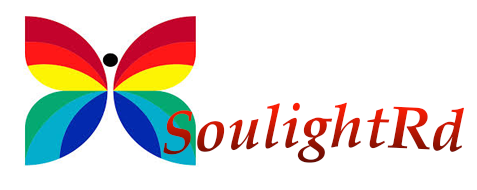
<style>
.page{position:relative;width:477px;height:190px;background:#ffffff}
.page>*{position:absolute;margin:0}
.t1{font:60px "Palatino-BoldItalic"}
</style>
<div class="page">
<p class="t1" style="left:163px;top:102px;width:301px;height:61px">SoulightRd<br>dd<br>Rd</p>
</div>
